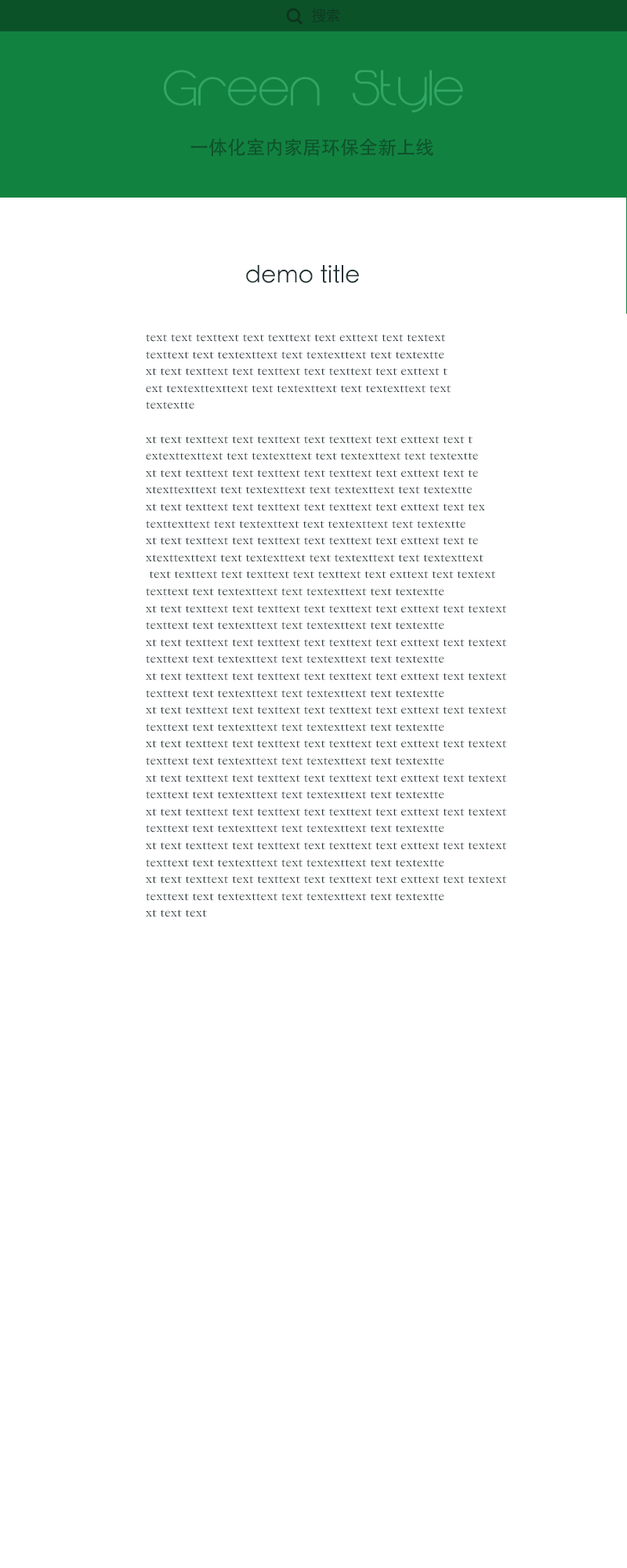
<style>
.page{position:relative;width:627px;height:1568px;background:#ffffff}
.page>*{position:absolute;margin:0}
.t1{font:18.8px "iconfont";color:#0e341e}
.t2{font:14.1px "MicrosoftYaHei";color:#0f3820}
.t3{font:47px "MajoramSans-Bold";color:#32a663}
.t4{font:18.8px "AdobeHeitiStd-Regular";color:#0e512a}
.t5{font:23.5px "STHeitiTC-Light";color:#223034}
.t6{font:14.1px "STSongti-SC-Light";color:#223034}
</style>
<div class="page">
<p class="t1" style="left:286px;top:8px;width:17px;height:17px">󰄬</p>
<p class="t2" style="left:312px;top:9px;width:28px;height:14px">搜索</p>
<p class="t3" style="left:164px;top:70px;width:299px;height:43px">Green Style</p>
<p class="t4" style="left:191px;top:138px;width:243px;height:18px">一体化室内家居环保全新上线</p>
<p class="t5" style="left:246px;top:265px;width:113px;height:18px">demo title</p>
<p class="t6" style="left:146px;top:334px;width:360px;height:583px">text text texttext text texttext text exttext text textext<br>texttext text textexttext text textexttext text textextte<br>xt text texttext text texttext text texttext text exttext t<br>ext textexttexttext text textexttext text textexttext text <br>textextte<br><br>xt text texttext text texttext text texttext text exttext text t<br>extexttexttext text textexttext text textexttext text textextte<br>xt text texttext text texttext text texttext text exttext text te<br>xtexttexttext text textexttext text textexttext text textextte<br>xt text texttext text texttext text texttext text exttext text tex<br>texttexttext text textexttext text textexttext text textextte<br>xt text texttext text texttext text texttext text exttext text te<br>xtexttexttext text textexttext text textexttext text textexttext<br> text texttext text texttext text texttext text exttext text textext<br>texttext text textexttext text textexttext text textextte<br>xt text texttext text texttext text texttext text exttext text textext<br>texttext text textexttext text textexttext text textextte<br>xt text texttext text texttext text texttext text exttext text textext<br>texttext text textexttext text textexttext text textextte<br>xt text texttext text texttext text texttext text exttext text textext<br>texttext text textexttext text textexttext text textextte<br>xt text texttext text texttext text texttext text exttext text textext<br>texttext text textexttext text textexttext text textextte<br>xt text texttext text texttext text texttext text exttext text textext<br>texttext text textexttext text textexttext text textextte<br>xt text texttext text texttext text texttext text exttext text textext<br>texttext text textexttext text textexttext text textextte<br>xt text texttext text texttext text texttext text exttext text textext<br>texttext text textexttext text textexttext text textextte<br>xt text texttext text texttext text texttext text exttext text textext<br>texttext text textexttext text textexttext text textextte<br>xt text texttext text texttext text texttext text exttext text textext<br>texttext text textexttext text textexttext text textextte<br>xt text text</p>
</div>
